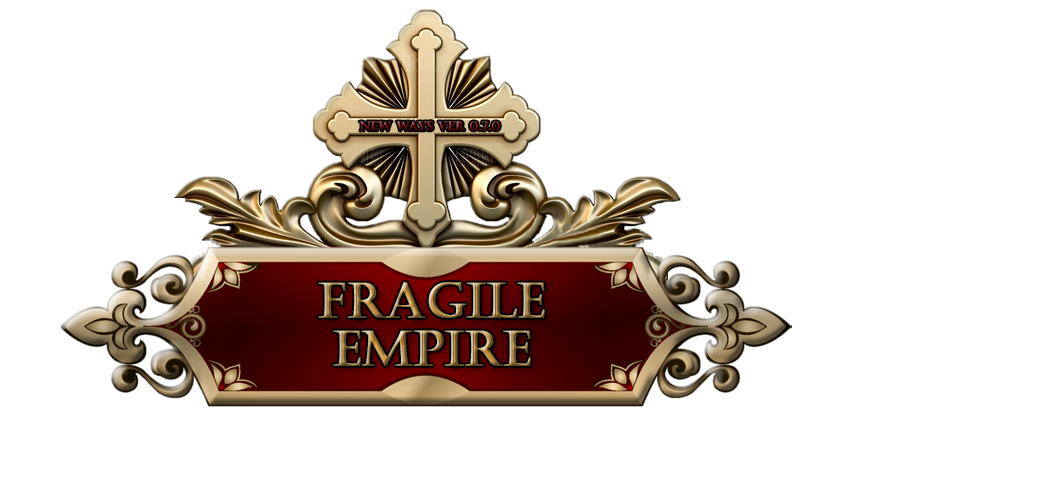
<style>
.page{position:relative;width:1064px;height:488px;background:#ffffff}
.page>*{position:absolute;margin:0}
.t1{font:12px "Castellar";font-weight:bold}
.t2{font:48px/24px "Castellar";font-weight:bold}
</style>
<div class="page">
<p class="t1" style="left:359px;top:121px;width:141px;height:10px">NEW WAYS VER 0.7.0</p>
<p class="t2" style="left:318px;top:282px;width:227px;height:84px;text-align:center">Fragile<br><br>empire</p>
</div>
